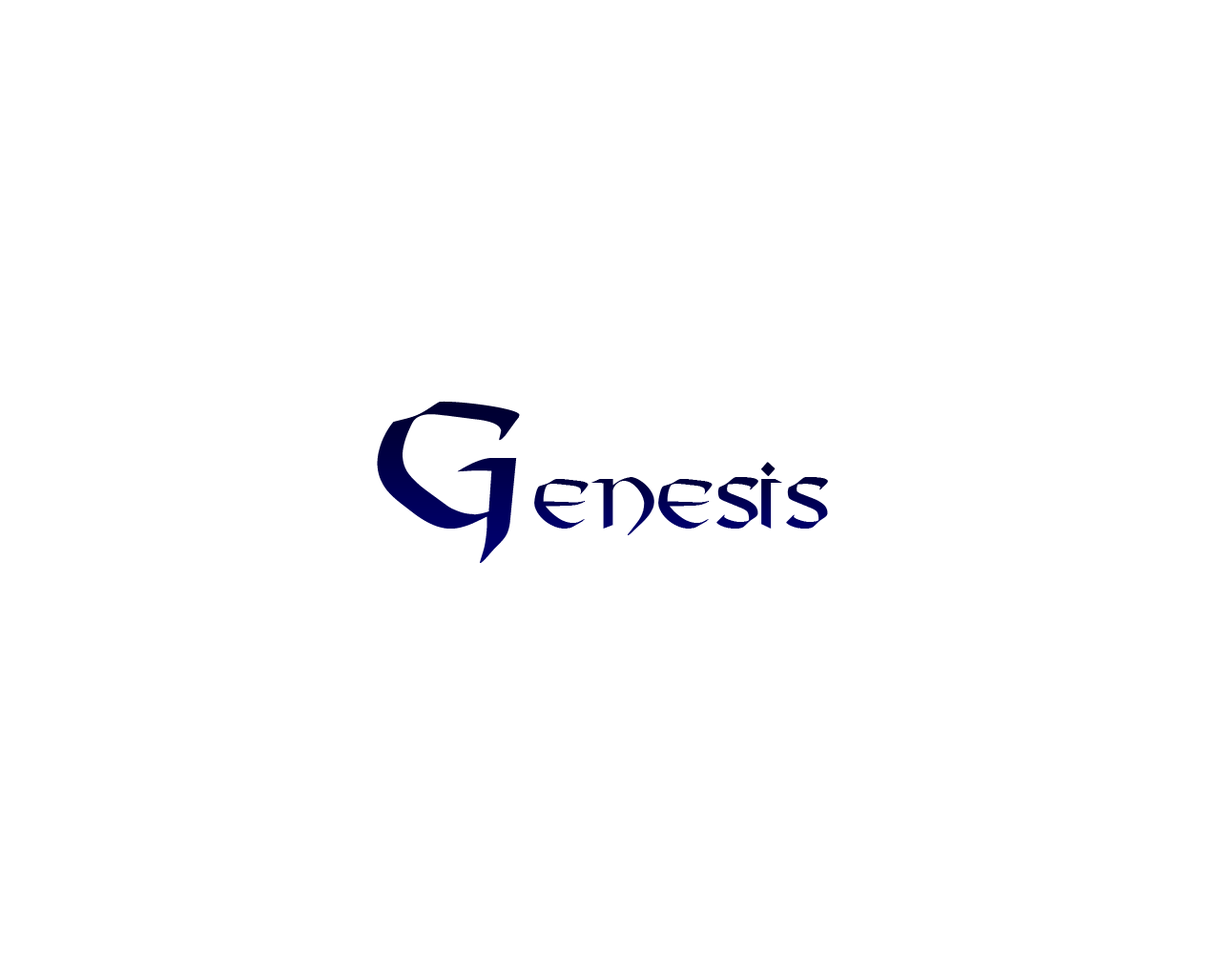
<style>
.page{position:relative;width:1221px;height:977px;background:#ffffff}
.page>*{position:absolute;margin:0}
.t1{font:174.4px "VikingPlain"}
.t2{font:68.7px "VikingPlain";color:#000054}
</style>
<div class="page">
<p class="t1" style="left:377px;top:401px;width:143px;height:162px">G</p>
<p class="t2" style="left:534px;top:462px;width:294px;height:73px">enesis</p>
</div>
